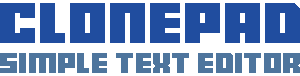
<style>
.page{position:relative;width:300px;height:76px;background:#ffffff}
.page>*{position:absolute;margin:0}
.t1{font:52.4px "Bankjob";color:#204d9f}
.t2{font:25.6px "Bankjob";color:#4e759d}
</style>
<div class="page">
<p class="t1" style="left:0px;top:3px;width:300px;height:40px">Clonepad</p>
<p class="t2" style="left:0px;top:53px;width:300px;height:20px">Simple text editor</p>
</div>
